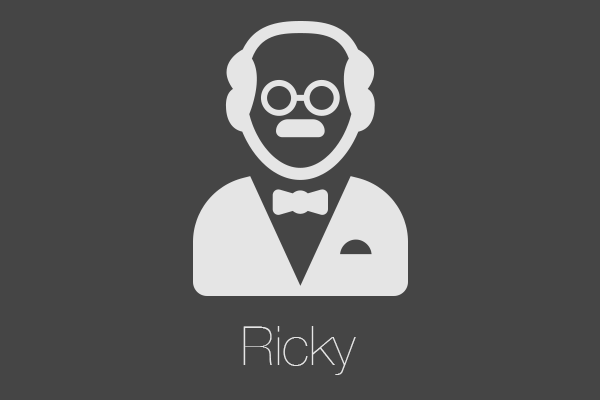
<style>
.page{position:relative;width:600px;height:400px;background:#454545}
.page>*{position:absolute;margin:0}
.t1{font:54.5px "HelveticaNeue-UltraLight";color:#e5e5e5}
</style>
<div class="page">
<p class="t1" style="left:243px;top:326px;width:113px;height:49px">Ricky</p>
</div>
